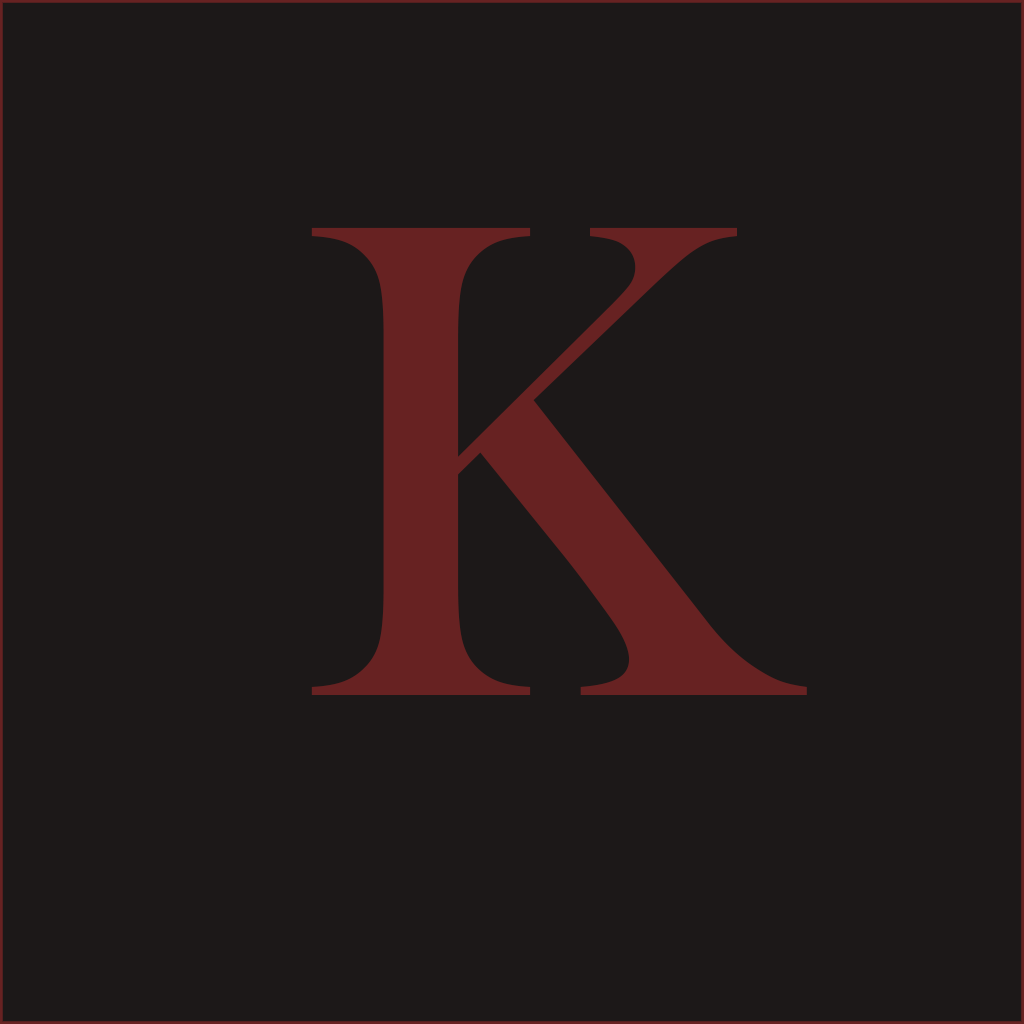
<style>
.page{position:relative;width:1024px;height:1024px;background:#1c1818}
.page>*{position:absolute;margin:0}
.t1{font:700px "BaskOldFace";color:#672222}
</style>
<div class="page">
<p class="t1" style="left:311px;top:227px;width:496px;height:468px">K</p>
</div>
